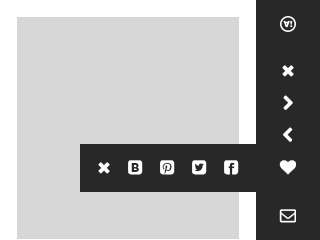
<style>
.page{position:relative;width:320px;height:240px;background:#d7d7d7}
.page>*{position:absolute;margin:0}
.t1{font:12px "HelveticaNeueCyr-Heavy";color:#282828}
</style>
<div class="page">
<p class="t1" style="left:131px;top:163px;width:8px;height:9px">В</p>
</div>
